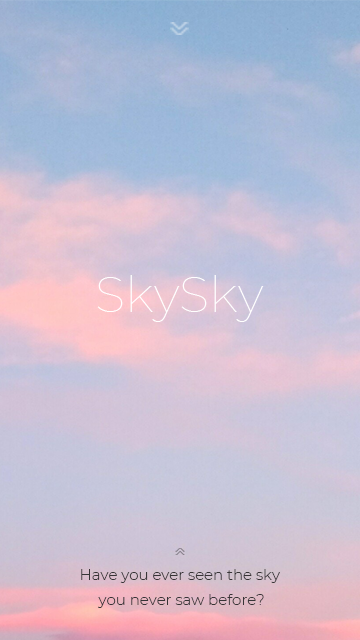
<style>
.page{position:relative;width:360px;height:640px}
.page>*{position:absolute;margin:0}
.t1{font:50px "Montserrat-Thin";color:#ffffff}
.t2{font:15px/25px "Montserrat-Light";color:#373436}
</style>
<div class="page">
<p class="t1" style="left:97px;top:275px;width:167px;height:47px">SkySky</p>
<p class="t2" style="left:81px;top:569px;width:199px;height:39px;text-align:center">Have you ever seen the sky <br>you never saw before?</p>
</div>
